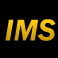
<style>
.page{position:relative;width:58px;height:58px;background:#000000}
.page>*{position:absolute;margin:0}
.t1{font:30px "FranklinGothic-MediumItalic";color:#e8b500;font-weight:bold}
</style>
<div class="page">
<p class="t1" style="left:5px;top:19px;width:51px;height:22px">IMS</p>
</div>
